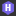
<style>
.page{position:relative;width:16px;height:16px;background:#333333}
.page>*{position:absolute;margin:0}
.t1{font:10px "Menlo-Bold";color:#ffffff}
</style>
<div class="page">
<p class="t1" style="left:5px;top:4px;width:6px;height:7px">H</p>
</div>
